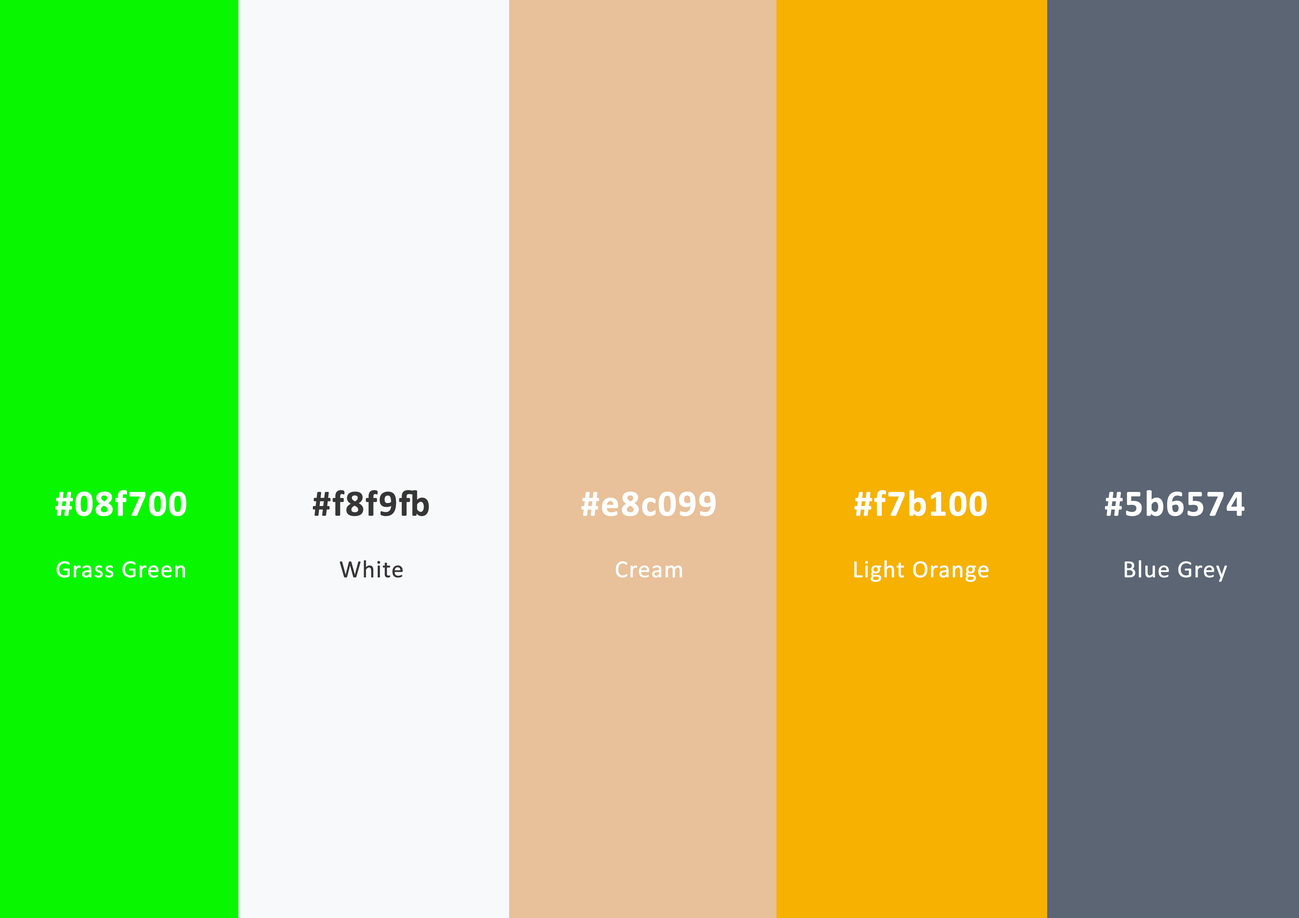
<style>
.page{position:relative;width:1299px;height:918px}
.page>*{position:absolute;margin:0}
.t1{font:24.7px/30.9px "Calibri";letter-spacing:0.01em;color:#ffffff;font-weight:bold}
.t2{font:37px/30.9px "Calibri";letter-spacing:0.01em;color:#373636;font-weight:bold}
.t3{font:37px/30.9px "Calibri-Bold";letter-spacing:0.01em;color:#ffffff;font-weight:bold}
.t4{font:37px/30.9px "Calibri-Bold";letter-spacing:0.01em;color:#373636;font-weight:bold}
.t5{font:24.7px/30.9px "Calibri";letter-spacing:0.01em;color:#373636;font-weight:bold}
.t6{font:37px/30.9px "Calibri";letter-spacing:0.01em;color:#ffffff;font-weight:bold}
</style>
<div class="page">
<p class="t1" style="left:55px;top:490px;width:131px;height:88px;text-align:center"><span class="t2"><br></span><span class="t3">#08f700<br><br></span>Grass Green</p>
<p class="t4" style="left:312px;top:490px;width:117px;height:88px;text-align:center"><span class="t2"><br></span>#f8f9fb<br><br><span class="t5">White</span></p>
<p class="t3" style="left:581px;top:492px;width:135px;height:86px;text-align:center"><span class="t6"><br></span>#e8c099<br><br><span class="t1">Cream</span></p>
<p class="t1" style="left:854px;top:490px;width:134px;height:92px"><span class="t6"><br></span><span class="t3">#f7b100<br><br></span>Light Orange</p>
<p class="t1" style="left:1105px;top:490px;width:139px;height:92px;text-align:center"><span class="t2"><br></span><span class="t3">#5b6574<br><br></span>Blue Grey</p>
</div>
